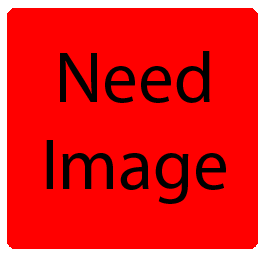
<style>
.page{position:relative;width:265px;height:256px;background:#ff0000}
.page>*{position:absolute;margin:0}
.t1{font:72px "MyriadPro-Regular";color:#000000}
</style>
<div class="page">
<p class="t1" style="left:46px;top:51px;width:180px;height:153px;text-align:center">Need<br>Image</p>
</div>
